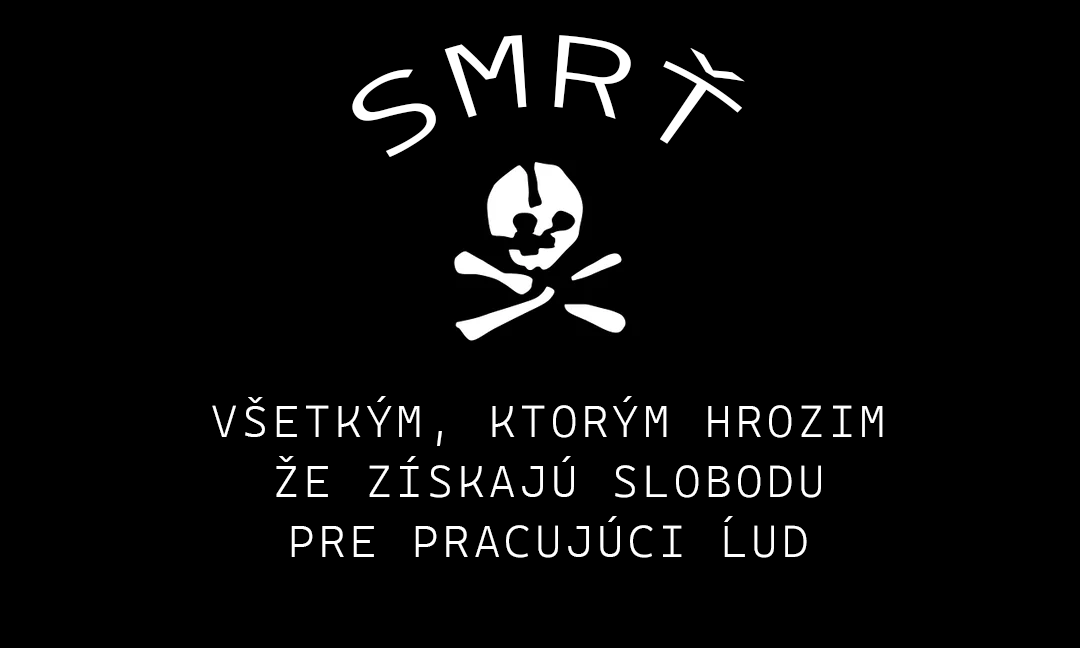
<style>
.page{position:relative;width:1080px;height:648px;background:#000000}
.page>*{position:absolute;margin:0}
.t1{font:100px "CascadiaCodeRoman-Light";letter-spacing:0.07em;color:#ffffff}
.t2{font:45px/60px "CascadiaCodeRoman-Light";letter-spacing:0.1em;color:#ffffff}
</style>
<div class="page">
<p class="t1" style="left:352px;top:35px;width:393px;height:122px">SMRŤ</p>
<p class="t2" style="left:212px;top:396px;width:671px;height:162px;text-align:center">VŠETKÝM, KTORÝM HROZIM<br>ŽE ZÍSKAJÚ SLOBODU<br>PRE PRACUJÚCI ĹUD</p>
</div>
